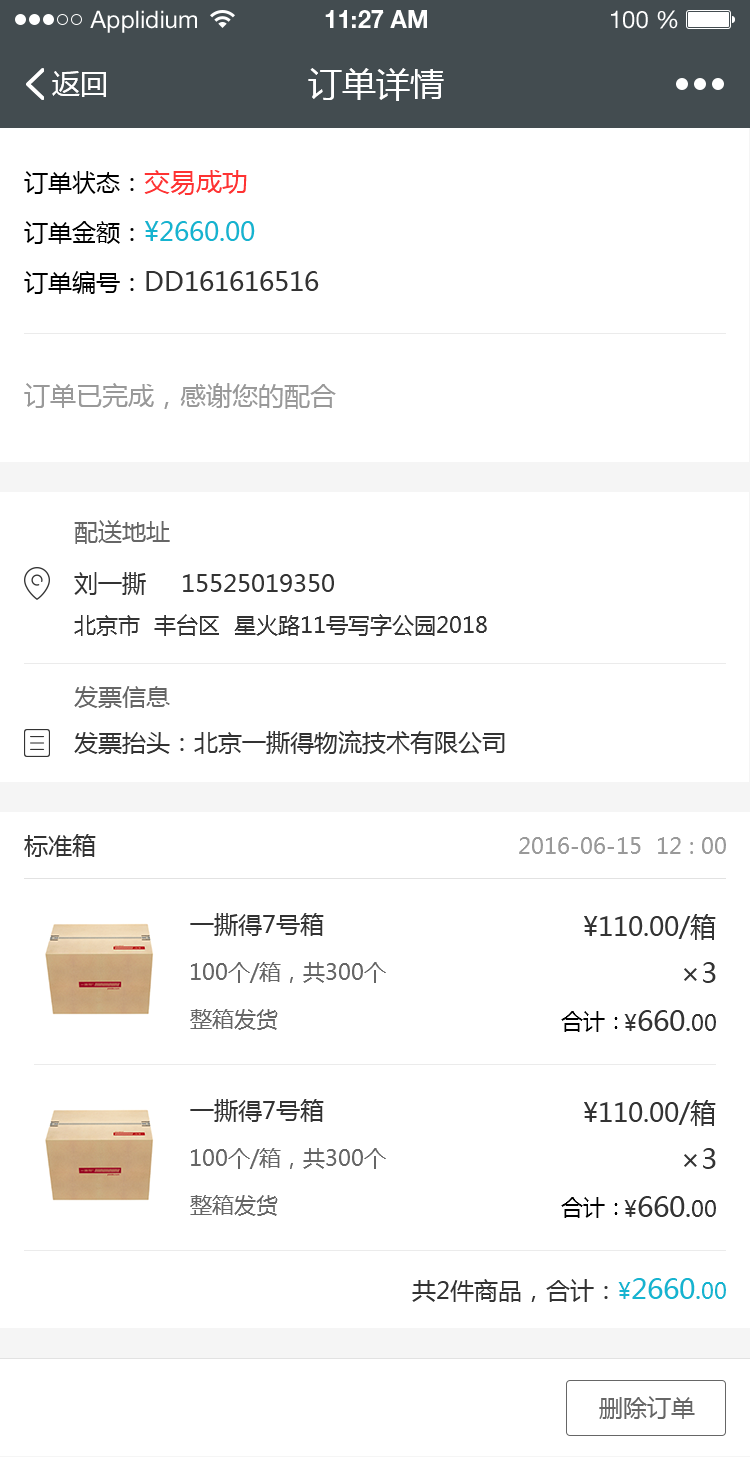
<style>
.page{position:relative;width:750px;height:1457px;background:#ffffff}
.page>*{position:absolute;margin:0}
.t1{font:24px "HelveticaNeueLTStd-Roman";color:#ffffff}
.t2{font:24px "HelveticaNeueLTStd-Bd";color:#ffffff}
.t3{font:28px "MicrosoftYaHei";color:#ffffff}
.t4{font:34px "MicrosoftYaHei";color:#ffffff}
.t5{font:26px/50px "MicrosoftYaHei";color:#333333}
.t6{font:24px/50px "MicrosoftYaHei";color:#000000}
.t7{font:26px/50px "MicrosoftYaHei";color:#fe3333}
.t8{font:26px/50px "MicrosoftYaHei";color:#15b4d0}
.t9{font:26px "MicrosoftYaHei";color:#999999}
.t10{font:24px "MicrosoftYaHei";color:#666666}
.t11{font:24px "MicrosoftYaHei";color:#333333}
.t12{font:22px "MicrosoftYaHei";color:#333333}
.t13{font:22px "MicrosoftYaHei";color:#999999}
.t14{font:26px "MicrosoftYaHei";color:#333333}
.t15{font:22px "MicrosoftYaHei";color:#666666}
.t16{font:28px "MicrosoftYaHei";color:#333333}
.t17{font:22px "MicrosoftYaHei";color:#000000}
.t18{font:22px "MicrosoftYaHei";color:#15b4d0}
.t19{font:28px "MicrosoftYaHei";color:#15b4d0}
.t20{font:26px "MicrosoftYaHei";color:#15b4d0}
</style>
<div class="page">
<p class="t1" style="left:90px;top:10px;width:107px;height:23px">Applidium</p>
<p class="t2" style="left:325px;top:10px;width:102px;height:18px">11:27 AM</p>
<p class="t1" style="left:611px;top:10px;width:67px;height:19px">100 %</p>
<p class="t3" style="left:52px;top:71px;width:54px;height:26px">返回</p>
<p class="t4" style="left:308px;top:68px;width:136px;height:33px">订单详情</p>
<p class="t5" style="left:24px;top:170px;width:295px;height:124px"><span class="t6">订单状态：</span><span class="t7">交易成功<br></span><span class="t6">订单金额：</span><span class="t8">¥2660.00<br></span><span class="t6">订单编号：</span>DD161616516</p>
<p class="t9" style="left:24px;top:383px;width:312px;height:26px">订单已完成，感谢您的配合</p>
<p class="t10" style="left:74px;top:520px;width:96px;height:24px">配送地址</p>
<p class="t11" style="left:74px;top:572px;width:260px;height:23px">刘一撕     15525019350</p>
<p class="t12" style="left:74px;top:614px;width:413px;height:22px">北京市  丰台区  星火路11号写字公园2018</p>
<p class="t10" style="left:74px;top:686px;width:96px;height:22px">发票信息</p>
<p class="t11" style="left:74px;top:730px;width:431px;height:24px">发票抬头：北京一撕得物流技术有限公司</p>
<p class="t11" style="left:24px;top:834px;width:72px;height:23px">标准箱</p>
<p class="t13" style="left:519px;top:837px;width:207px;height:17px">2016-06-15  12 : 00</p>
<p class="t11" style="left:190px;top:913px;width:134px;height:23px">一撕得7号箱</p>
<p class="t14" style="left:584px;top:914px;width:132px;height:26px">¥110.00/箱</p>
<p class="t15" style="left:191px;top:962px;width:195px;height:21px">100个/箱，共300个</p>
<p class="t16" style="left:684px;top:962px;width:32px;height:21px">×3</p>
<p class="t15" style="left:190px;top:1009px;width:88px;height:21px">整箱发货</p>
<p class="t17" style="left:561px;top:1011px;width:57px;height:21px">合计：</p>
<p class="t16" style="left:624px;top:1010px;width:92px;height:21px"><span class="t12">¥</span>660<span class="t14">.</span><span class="t12">00</span></p>
<p class="t11" style="left:190px;top:1099px;width:134px;height:23px">一撕得7号箱</p>
<p class="t14" style="left:584px;top:1100px;width:132px;height:26px">¥110.00/箱</p>
<p class="t15" style="left:191px;top:1148px;width:195px;height:21px">100个/箱，共300个</p>
<p class="t16" style="left:684px;top:1148px;width:32px;height:21px">×3</p>
<p class="t15" style="left:190px;top:1195px;width:88px;height:21px">整箱发货</p>
<p class="t17" style="left:561px;top:1197px;width:57px;height:21px">合计：</p>
<p class="t16" style="left:624px;top:1196px;width:92px;height:21px"><span class="t12">¥</span>660<span class="t14">.</span><span class="t12">00</span></p>
<p class="t11" style="left:412px;top:1278px;width:314px;height:24px">共2件商品，合计：<span class="t18">¥</span><span class="t19">2660</span><span class="t20">.</span><span class="t18">00</span></p>
<p class="t10" style="left:599px;top:1396px;width:96px;height:23px">删除订单</p>
</div>
